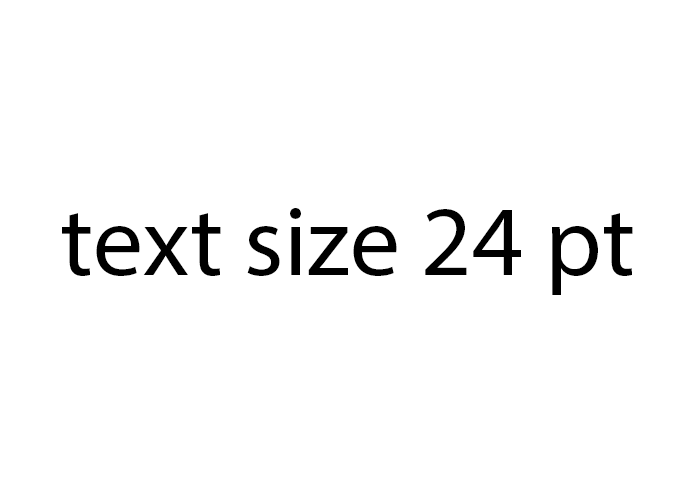
<style>
.page{position:relative;width:700px;height:500px;background:#ffffff}
.page>*{position:absolute;margin:0}
.t1{font:100px "MyriadPro-Regular";color:#000000}
</style>
<div class="page">
<p class="t1" style="left:62px;top:208px;width:571px;height:87px">text size 24 pt</p>
</div>
